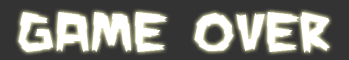
<style>
.page{position:relative;width:349px;height:60px;background:#333333}
.page>*{position:absolute;margin:0}
.t1{font:60px "ManEaterBB";color:#ffffff}
</style>
<div class="page">
<p class="t1" style="left:18px;top:12px;width:312px;height:41px">GAME OVER</p>
</div>
